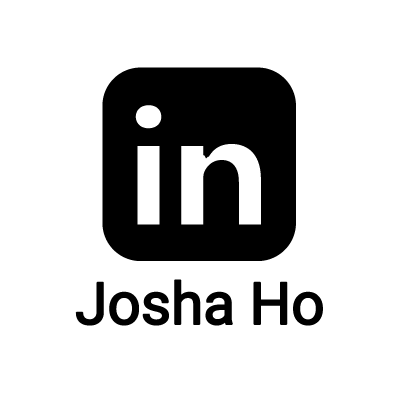
<style>
.page{position:relative;width:400px;height:400px;background:#ffffff}
.page>*{position:absolute;margin:0}
.t1{font:100px "Roboto-Regular";letter-spacing:-0.025em;color:#000000;font-weight:bold}
</style>
<div class="page">
<p class="t1" style="left:75px;top:279px;width:248px;height:47px">Josha Ho</p>
</div>
